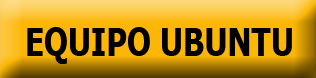
<style>
.page{position:relative;width:316px;height:78px}
.page>*{position:absolute;margin:0}
.t1{font:39px "Tahoma-Bold";color:#000000;scale:0.8 1}
</style>
<div class="page">
<p class="t1" style="left:27px;top:27px;width:265px;height:37px">EQUIPO UBUNTU</p>
</div>
